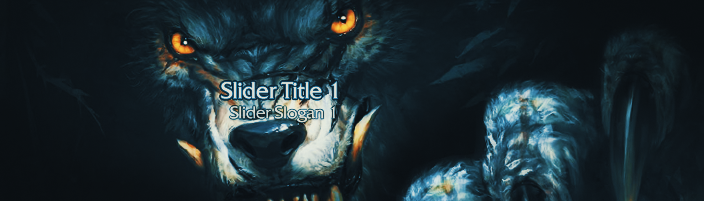
<style>
.page{position:relative;width:704px;height:201px}
.page>*{position:absolute;margin:0}
.t1{font:22.8px "BlizQuadrataWeb";color:#e2e2e2}
.t2{font:16.8px "BlizQuadrataWeb";color:#e2e2e2}
</style>
<div class="page">
<p class="t1" style="left:221px;top:81px;width:117px;height:18px">Slider Title 1</p>
<p class="t2" style="left:230px;top:105px;width:106px;height:18px;opacity:0.8">Slider Slogan 1</p>
</div>
